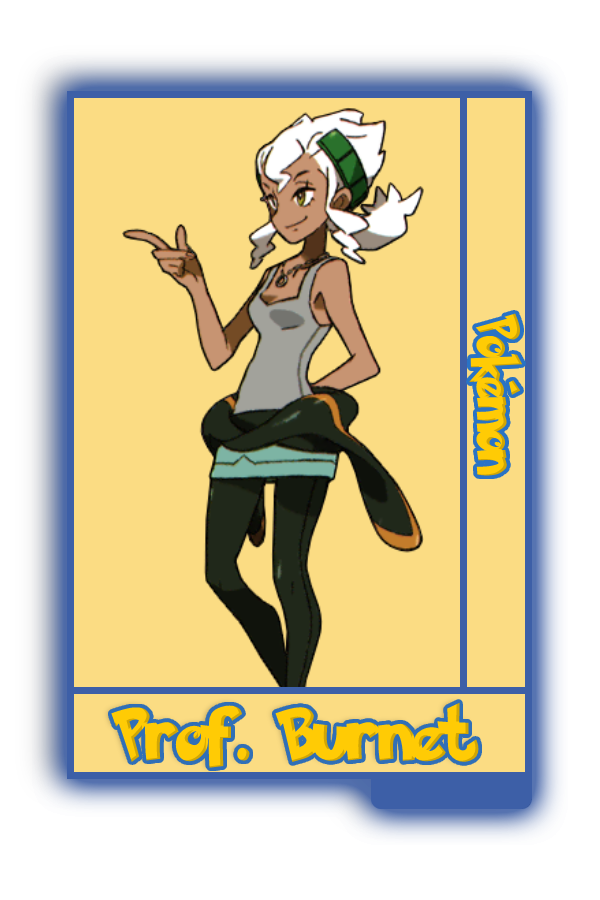
<style>
.page{position:relative;width:600px;height:900px;background:#fbdc83}
.page>*{position:absolute;margin:0}
.t1{font:48.8px "PokemonSolidNormal";color:#ffcb05;scale:0.8 1}
.t2{font:60.1px "PokemonSolidNormal";color:#ffcb05;scale:0.96 1}
</style>
<div class="page">
<p class="t1" style="left:469px;top:313px;width:54px;height:163px;rotate:90deg">Pokémon</p>
<p class="t2" style="left:111px;top:702px;width:368px;height:66px">Prof. Burnet</p>
</div>
